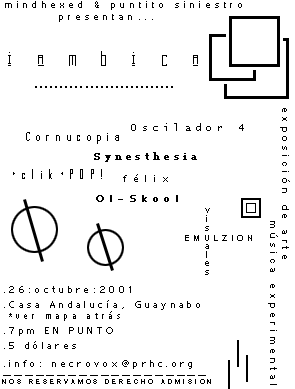
<style>
.page{position:relative;width:295px;height:389px;background:#ffffff}
.page>*{position:absolute;margin:0}
.t1{font:9px "MicrosoftSansSerif";letter-spacing:0.475em;color:#000000}
.t2{font:21px "Kashmir";letter-spacing:0.475em;color:#000000}
.t3{font:6px "AdLibBT-Regular";letter-spacing:0.475em;color:#000000;font-weight:bold}
.t4{font:9px "Arial-BoldMT";letter-spacing:0.475em;color:#000000}
.t5{font:10px "LucidaConsole";letter-spacing:0.475em;color:#000000}
.t6{font:12px "DraftGothicThin";letter-spacing:0.475em;color:#000000}
.t7{font:10px "Georgia";letter-spacing:0.475em;color:#000000;font-weight:bold}
.t8{font:12px "GothamNightsNormal";letter-spacing:0.475em;color:#000000}
.t9{font:14px "ADMUI3Sm";letter-spacing:0.475em;color:#000000}
.t10{font:11px "Photoshop Small";letter-spacing:0.475em;color:#000000;font-weight:bold}
.t11{font:6px/1px "ADMUI3Sm";letter-spacing:0.475em;color:#000000;font-weight:bold}
.t12{font:8px "Arial-BoldMT";letter-spacing:0.475em;color:#000000}
.t13{font:7px "ADMUI3Sm";letter-spacing:0.475em;color:#000000;font-weight:bold}
.t14{font:9px "ArialNarrow";letter-spacing:0.475em;color:#000000}
.t15{font:6px "Fixedsys";letter-spacing:0.475em;color:#000000;font-weight:bold}
.t16{font:6px "ArialMT";letter-spacing:0.475em;color:#000000;font-weight:bold}
</style>
<div class="page">
<p class="t1" style="left:5px;top:1px;width:237px;height:9px">mindhexed &amp; puntito siniestro</p>
<p class="t1" style="left:59px;top:14px;width:94px;height:8px">presentan...</p>
<p class="t2" style="left:8px;top:51px;width:190px;height:15px">i á m b i c a</p>
<p class="t3" style="left:35px;top:86px;width:138px;height:2px">::::::::::::::::::::::::::::</p>
<p class="t4" style="left:280px;top:108px;width:10px;height:151px;rotate:90deg">exposición de arte</p>
<p class="t5" style="left:131px;top:123px;width:113px;height:8px">Oscilador 4</p>
<p class="t6" style="left:26px;top:132px;width:93px;height:12px">Cornucopia</p>
<p class="t7" style="left:94px;top:152px;width:103px;height:10px">Synesthesia</p>
<p class="t8" style="left:13px;top:169px;width:89px;height:10px">&gt;clik&lt;POP!</p>
<p class="t9" style="left:123px;top:174px;width:45px;height:8px">félix</p>
<p class="t10" style="left:96px;top:195px;width:82px;height:7px">Ol-Skool</p>
<p class="t11" style="left:205px;top:208px;width:5px;height:67px">vis ales</p>
<p class="t4" style="left:268px;top:221px;width:10px;height:164px;rotate:90deg">música experimental</p>
<p class="t12" style="left:185px;top:235px;width:67px;height:6px">EMULZION</p>
<p class="t13" style="left:4px;top:286px;width:127px;height:7px">.26:octubre:2001</p>
<p class="t13" style="left:4px;top:300px;width:196px;height:10px">.Casa Andalucía, Guaynabo</p>
<p class="t14" style="left:9px;top:311px;width:111px;height:10px">*ver mapa atrás</p>
<p class="t13" style="left:4px;top:327px;width:109px;height:9px">.7pm EN PUNTO</p>
<p class="t13" style="left:4px;top:341px;width:72px;height:8px">.5 dólares</p>
<p class="t13" style="left:4px;top:360px;width:188px;height:9px">.info: necrovox@prhc.org</p>
<p class="t15" style="left:3px;top:375px;width:203px;height:1px">___________________</p>
<p class="t16" style="left:2px;top:379px;width:209px;height:5px">NOS RESERVAMOS DERECHO ADMISION</p>
</div>
